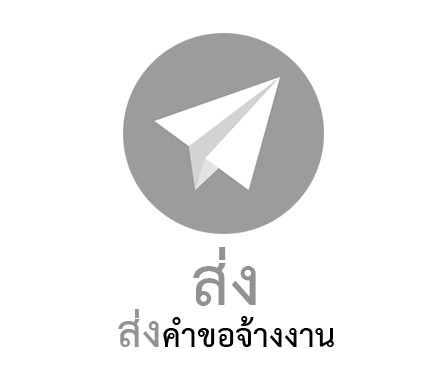
<style>
.page{position:relative;width:448px;height:385px;background:#ffffff}
.page>*{position:absolute;margin:0}
.t1{font:96.3px "THSarabunPSK-Bold";color:#929292}
.t2{font:47.4px "THSarabunPSK-Bold";color:#000000}
.t3{font:62.6px "THSarabunPSK-Bold";color:#ff0000}
</style>
<div class="page">
<p class="t1" style="left:193px;top:247px;width:63px;height:59px">ส่ง</p>
<p class="t2" style="left:118px;top:309px;width:216px;height:38px"><span class="t3">ส่ง</span>คำขอจ้างงาน</p>
</div>
